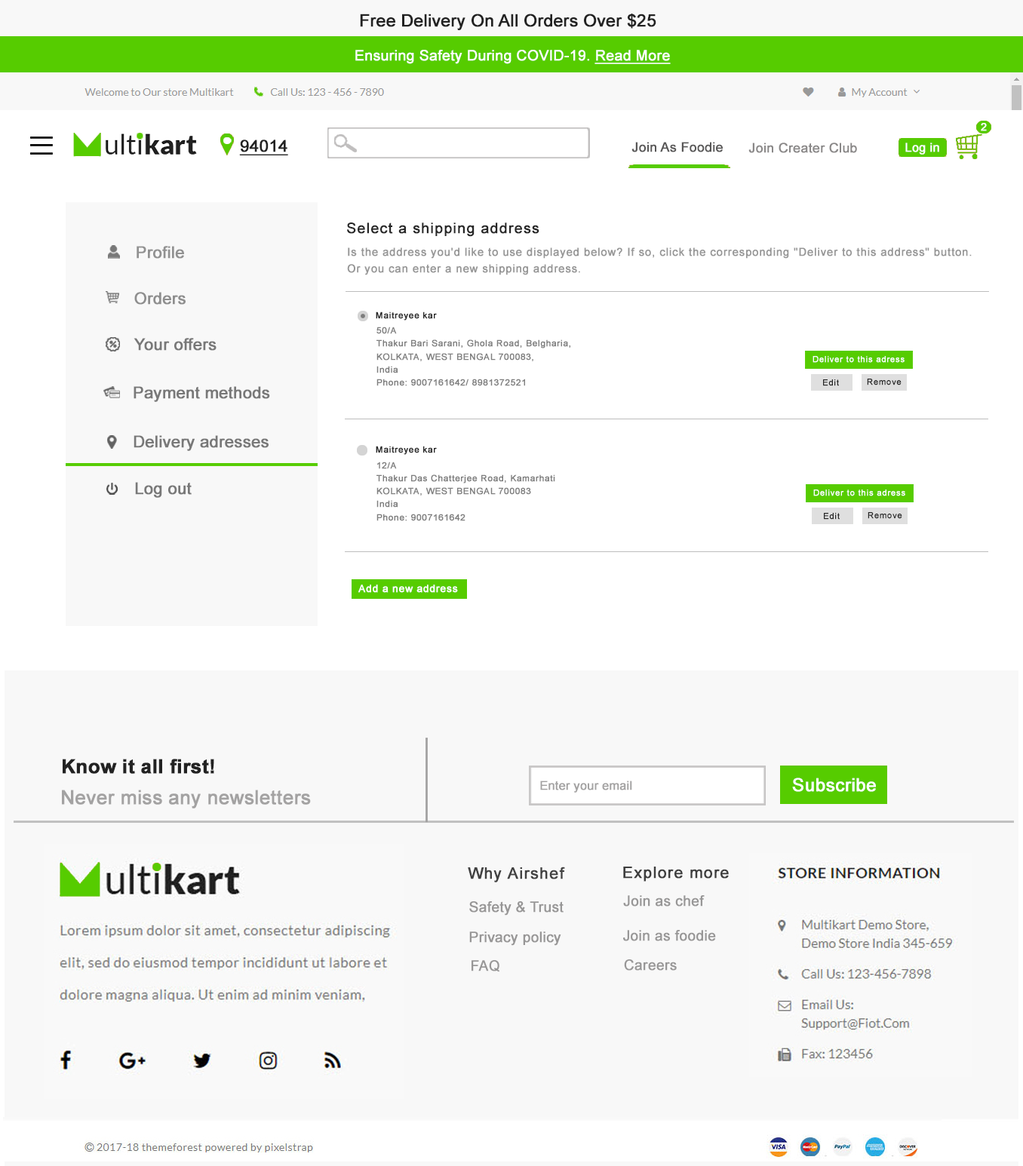
<style>
.page{position:relative;width:1023px;height:1166px;background:#ffffff}
.page>*{position:absolute;margin:0}
.t1{font:16.9px "ArialMT";color:#222222;font-weight:bold}
.t2{font:14.5px "ArialMT";color:#ffffff;font-weight:bold}
.t3{font:14.5px "ArialMT";color:#ffffff;font-weight:bold;text-decoration:underline}
.t4{font:10.7px "ArialMT";color:#ffffff;font-weight:bold}
.t5{font:16.5px "ArialMT";color:#222222;font-weight:bold;text-decoration:underline}
.t6{font:13.2px "ArialMT";color:#585757;font-weight:bold}
.t7{font:13.2px "ArialMT";color:#8a8888;font-weight:bold}
.t8{font:12.1px "ArialMT";color:#ffffff;font-weight:bold}
.t9{font:14.5px "ArialMT";letter-spacing:0.05em;color:#262626;font-weight:bold}
.t10{font:16.2px "ArialMT";color:#919191;font-weight:bold}
.t11{font:10.9px "ArialMT";letter-spacing:0.05em;color:#969696;font-weight:bold}
.t12{font:16.2px "ArialMT";color:#8e8e8e;font-weight:bold}
.t13{font:8.7px "ArialMT";letter-spacing:0.05em;color:#262626;font-weight:bold}
.t14{font:8.7px "ArialMT";letter-spacing:0.05em;color:#7f7f7f;font-weight:bold}
.t15{font:16.2px "ArialMT";color:#787878;font-weight:bold}
.t16{font:8.4px "ArialMT";letter-spacing:0.05em;color:#ffffff;font-weight:bold}
.t17{font:8.4px "ArialMT";letter-spacing:0.05em;color:#262626;font-weight:bold}
.t18{font:10.1px "ArialMT";letter-spacing:0.05em;color:#ffffff;font-weight:bold}
.t19{font:19.4px "Arial-BoldMT";color:#222222;font-weight:bold}
.t20{font:12px "ArialMT";color:#a3a2a2;font-weight:bold}
.t21{font:18.1px "ArialMT";color:#ffffff;font-weight:bold}
.t22{font:19.4px "ArialMT";color:#a3a2a2;font-weight:bold}
.t23{font:15.7px "ArialMT";letter-spacing:0.05em;color:#414141;font-weight:bold}
.t24{font:15.7px "ArialMT";letter-spacing:0.05em;color:#3e3e3e;font-weight:bold}
.t25{font:14.2px "ArialMT";color:#979696;font-weight:bold}
.t26{font:14.2px "ArialMT";color:#989797;font-weight:bold}
</style>
<div class="page">
<p class="t1" style="left:360px;top:14px;width:296px;height:16px">Free Delivery On All Orders Over $25</p>
<p class="t2" style="left:355px;top:50px;width:315px;height:14px">Ensuring Safety During COVID-19. <span class="t3">Read More</span></p>
<p class="t4" style="left:980px;top:123px;width:6px;height:8px">2</p>
<p class="t5" style="left:239px;top:140px;width:49px;height:15px">94014</p>
<p class="t6" style="left:631px;top:142px;width:92px;height:10px">Join As Foodie</p>
<p class="t7" style="left:748px;top:143px;width:109px;height:10px">Join Creater Club</p>
<p class="t8" style="left:905px;top:143px;width:34px;height:12px">Log in</p>
<p class="t9" style="left:347px;top:222px;width:192px;height:15px">Select a shipping address</p>
<p class="t10" style="left:137px;top:246px;width:47px;height:13px">Profile</p>
<p class="t11" style="left:347px;top:247px;width:624px;height:28px">Is the address you'd like to use displayed below? If so, click the corresponding "Deliver to this address" button. <br>Or you can enter a new shipping address.</p>
<p class="t12" style="left:134px;top:292px;width:52px;height:13px">Orders</p>
<p class="t13" style="left:376px;top:311px;width:61px;height:10px">Maitreyee kar</p>
<p class="t14" style="left:376px;top:327px;width:194px;height:59px">50/A<br>Thakur Bari Sarani, Ghola Road, Belgharia, <br>KOLKATA, WEST BENGAL 700083, <br>India<br>Phone: 9007161642/ 8981372521</p>
<p class="t15" style="left:133px;top:338px;width:83px;height:13px">Your offers</p>
<p class="t16" style="left:812px;top:356px;width:92px;height:7px">Deliver to this adress</p>
<p class="t15" style="left:133px;top:386px;width:137px;height:16px">Payment methods</p>
<p class="t17" style="left:823px;top:379px;width:16px;height:7px">Edit</p>
<p class="t17" style="left:867px;top:379px;width:34px;height:6px">Remove</p>
<p class="t15" style="left:133px;top:435px;width:135px;height:16px">Delivery adresses</p>
<p class="t13" style="left:376px;top:446px;width:61px;height:9px">Maitreyee kar</p>
<p class="t14" style="left:376px;top:462px;width:179px;height:59px">12/A<br>Thakur Das Chatterjee Road, Kamarhati<br>KOLKATA, WEST BENGAL 700083<br>India<br>Phone: 9007161642</p>
<p class="t15" style="left:135px;top:482px;width:57px;height:16px">Log out</p>
<p class="t16" style="left:813px;top:489px;width:92px;height:7px">Deliver to this adress</p>
<p class="t17" style="left:824px;top:513px;width:15px;height:7px">Edit</p>
<p class="t17" style="left:867px;top:512px;width:35px;height:7px">Remove</p>
<p class="t18" style="left:358px;top:584px;width:100px;height:9px">Add a new address</p>
<p class="t19" style="left:63px;top:759px;width:151px;height:15px">Know it all first!</p>
<p class="t20" style="left:540px;top:781px;width:92px;height:12px">Enter your email</p>
<p class="t21" style="left:792px;top:778px;width:84px;height:14px">Subscribe</p>
<p class="t22" style="left:62px;top:790px;width:249px;height:18px">Never miss any newsletters</p>
<p class="t23" style="left:468px;top:867px;width:97px;height:15px">Why Airshef</p>
<p class="t24" style="left:623px;top:867px;width:106px;height:15px">Explore more</p>
<p class="t25" style="left:469px;top:901px;width:94px;height:15px">Safety &amp; Trust</p>
<p class="t26" style="left:623px;top:895px;width:81px;height:12px">Join as chef</p>
<p class="t26" style="left:623px;top:930px;width:93px;height:11px">Join as foodie</p>
<p class="t25" style="left:469px;top:931px;width:92px;height:15px">Privacy policy</p>
<p class="t25" style="left:471px;top:960px;width:28px;height:12px">FAQ</p>
<p class="t26" style="left:624px;top:959px;width:53px;height:12px">Careers</p>
</div>
